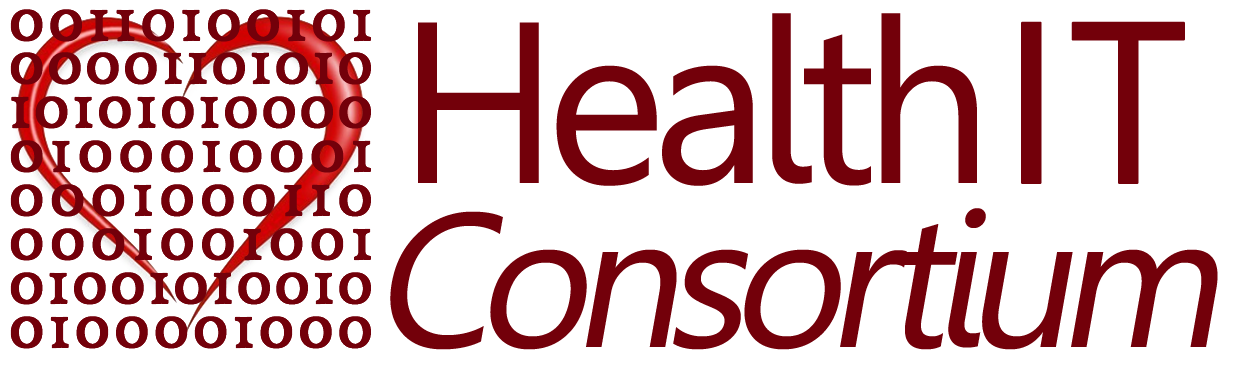
<style>
.page{position:relative;width:1240px;height:367px;background:#ffffff}
.page>*{position:absolute;margin:0}
.t1{font:190px/164px "Gisha";letter-spacing:-0.08em;color:#73000a;font-style:italic}
.t2{font:229px/28.7px "Gisha";letter-spacing:-0.06em;color:#73000a}
.t3{font:229px/28.7px "Gisha";color:#73000a;font-weight:bold}
</style>
<div class="page">
<p class="t1" style="left:390px;top:13px;width:828px;height:337px;text-align:center"><span class="t2">Health </span><span class="t3">IT<br></span>Consortium</p>
</div>
